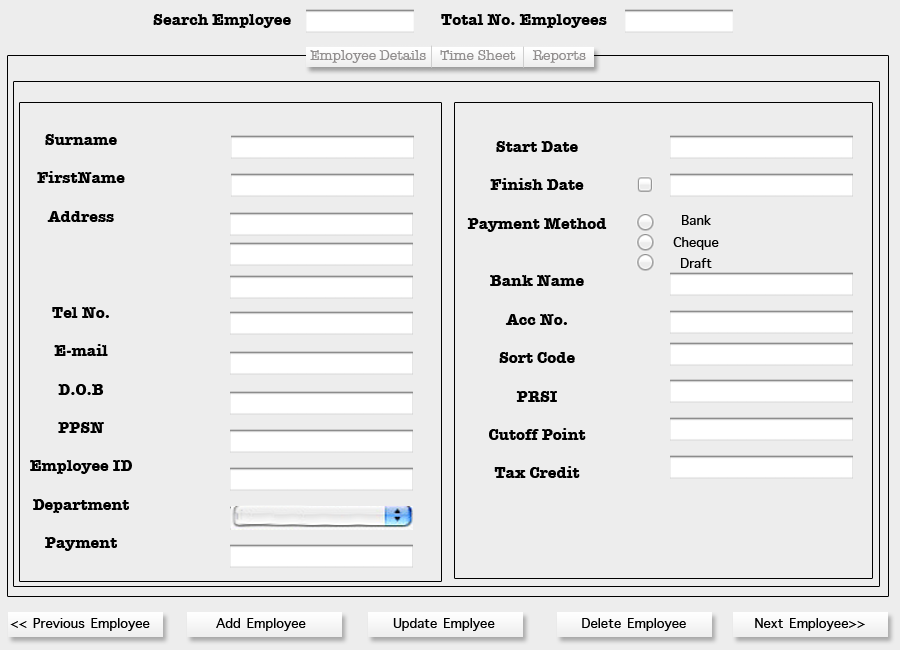
<style>
.page{position:relative;width:900px;height:650px;background:#ededed}
.page>*{position:absolute;margin:0}
.t1{font:16px "AmericanTypewriter-Bold";color:#000000}
.t2{font:14px "AmericanTypewriter";color:#918e8e}
.t3{font:18px "AppleSymbols";color:#000000}
</style>
<div class="page">
<p class="t1" style="left:153px;top:14px;width:454px;height:14px">Search Employee     Total No. Employees</p>
<p class="t2" style="left:310px;top:50px;width:276px;height:13px">Employee Details    Time Sheet     Reports</p>
<p class="t1" style="left:30px;top:134px;width:102px;height:417px;text-align:center">Surname<br><br>FirstName<br><br>Address<br><br><br><br><br>Tel No.<br><br>E-mail<br><br>D.O.B<br><br>PPSN<br><br>Employee ID<br><br>Department<br><br>Payment</p>
<p class="t1" style="left:467px;top:141px;width:140px;height:337px;text-align:center">Start Date<br><br>Finish Date<br><br>Payment Method<br><br><br>Bank Name<br><br>Acc No.<br><br>Sort Code<br><br>PRSI<br><br>Cutoff Point<br><br>Tax Credit</p>
<p class="t3" style="left:673px;top:215px;width:46px;height:53px;text-align:center">Bank<br>Cheque<br>Draft</p>
<p class="t3" style="left:10px;top:618px;width:140px;height:13px">&lt;&lt; Previous Employee</p>
<p class="t3" style="left:216px;top:618px;width:90px;height:13px">Add Employee</p>
<p class="t3" style="left:393px;top:618px;width:102px;height:13px">Update Emplyee</p>
<p class="t3" style="left:582px;top:618px;width:104px;height:13px">Delete Employee</p>
<p class="t3" style="left:755px;top:618px;width:110px;height:13px">Next Employee&gt;&gt;</p>
</div>
